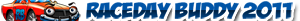
<style>
.page{position:relative;width:300px;height:21px;background:#ffffff}
.page>*{position:absolute;margin:0}
.t1{font:21.4px "BadaBoomBB";text-transform:uppercase;scale:1.4 1}
</style>
<div class="page">
<p class="t1" style="left:86px;top:1px;width:207px;height:18px">RACEDAY BUDDY 2011</p>
</div>
